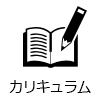
<style>
.page{position:relative;width:100px;height:100px;background:#ffffff}
.page>*{position:absolute;margin:0}
.t1{font:13.6px "Meiryo";color:#000000}
</style>
<div class="page">
<p class="t1" style="left:9px;top:80px;width:82px;height:13px">カリキュラム</p>
</div>
